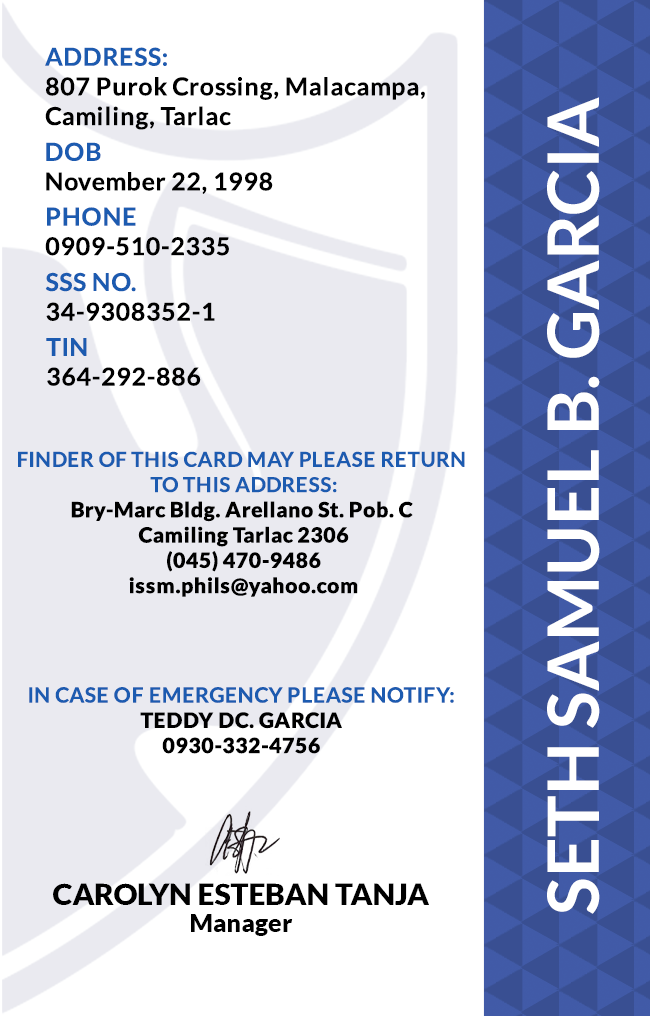
<style>
.page{position:relative;width:650px;height:1016px;background:#ffffff}
.page>*{position:absolute;margin:0}
.t1{font:24.7px/29.6px "Lato-Bold";letter-spacing:0.025em;color:#000000}
.t2{font:70.8px "Lato-Bold";color:#ffffff}
.t3{font:24.7px/29.6px "Lato-Bold";letter-spacing:0.025em}
.t4{font:21.1px "Lato-Black";letter-spacing:0.025em}
.t5{font:20.5px/25.3px "Lato-Bold";letter-spacing:0.025em;text-transform:uppercase}
.t6{font:21.1px/25.3px "Lato-Bold";letter-spacing:0.025em}
.t7{font:29.5px "Lato-Black";color:#000000}
.t8{font:25px "Lato-Black";color:#000000}
</style>
<div class="page">
<p class="t1" style="left:45px;top:47px;width:380px;height:83px">ADDRESS:<br>807 Purok Crossing, Malacampa,<br>Camiling, Tarlac</p>
<p class="t2" style="left:547px;top:97px;width:53px;height:817px;rotate:-90deg">SETH SAMUEL B. GARCIA</p>
<p class="t1" style="left:46px;top:142px;width:227px;height:52px">DOB<br>November 22, 1998</p>
<p class="t3" style="left:45px;top:207px;width:184px;height:49px">PHONE <br>0909-510-2335</p>
<p class="t3" style="left:45px;top:272px;width:170px;height:49px">SSS NO.<br>34-9308352-1</p>
<p class="t1" style="left:46px;top:338px;width:155px;height:48px">TIN<br>364-292-886</p>
<p class="t4" style="left:18px;top:451px;width:447px;height:146px;text-align:center"><span class="t5">Finder of this card may please return <br>to this address:<br></span>Bry-Marc Bldg. Arellano St. Pob. C <br>Camiling Tarlac 2306<br>(045) 470-9486<br>issm.phils@yahoo.com</p>
<p class="t6" style="left:29px;top:687px;width:425px;height:67px;text-align:center">IN CASE OF EMERGENCY PLEASE NOTIFY:<br><span class="t4">TEDDY DC. GARCIA<br>0930-332-4756</span></p>
<p class="t7" style="left:53px;top:883px;width:376px;height:22px">CAROLYN ESTEBAN TANJA</p>
<p class="t8" style="left:191px;top:914px;width:102px;height:22px">Manager</p>
</div>
